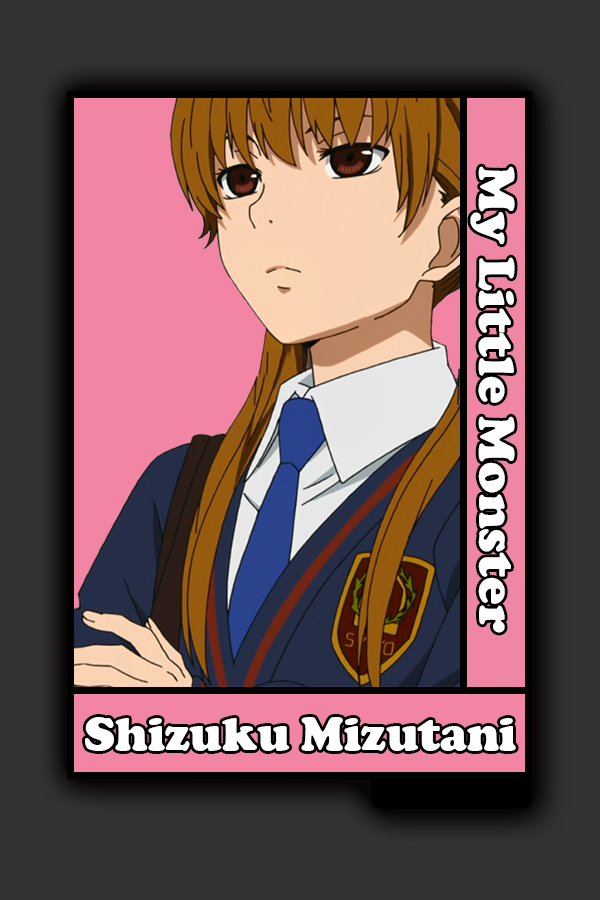
<style>
.page{position:relative;width:600px;height:900px;background:#333333}
.page>*{position:absolute;margin:0}
.t1{font:52px "CooperBlack";color:#ffffff}
.t2{font:47.9px "CooperBlack";color:#ffffff}
</style>
<div class="page">
<p class="t1" style="left:470px;top:166px;width:45px;height:467px;rotate:90deg">My Little Monster</p>
<p class="t2" style="left:85px;top:717px;width:431px;height:34px">Shizuku Mizutani</p>
</div>
